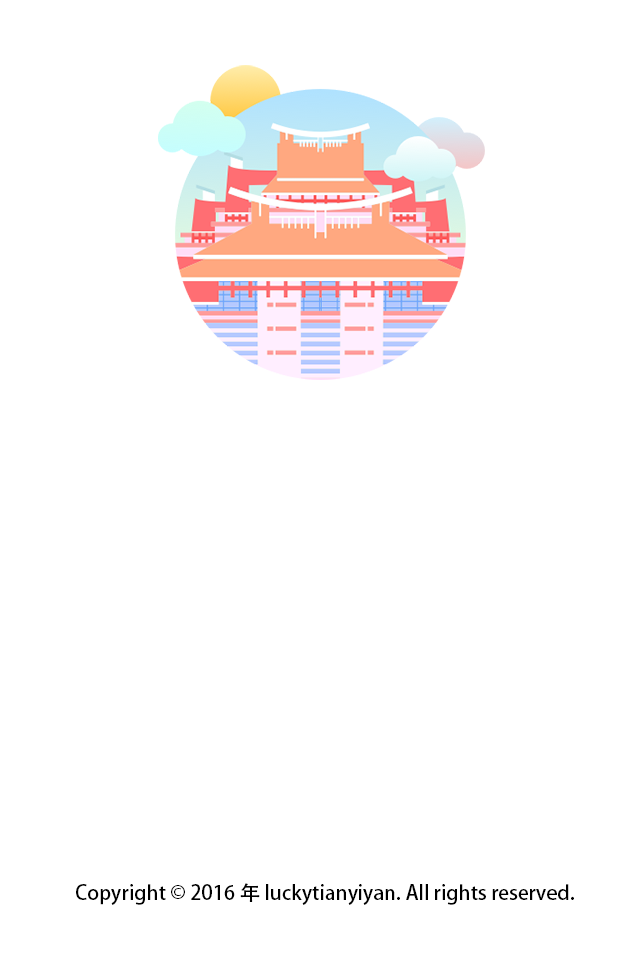
<style>
.page{position:relative;width:640px;height:960px;background:#ffffff}
.page>*{position:absolute;margin:0}
.t1{font:20px "AdobeHeitiStd-Regular";color:#000000}
</style>
<div class="page">
<p class="t1" style="left:76px;top:883px;width:498px;height:22px">Copyright © 2016年 luckytianyiyan. All rights reserved.</p>
</div>
